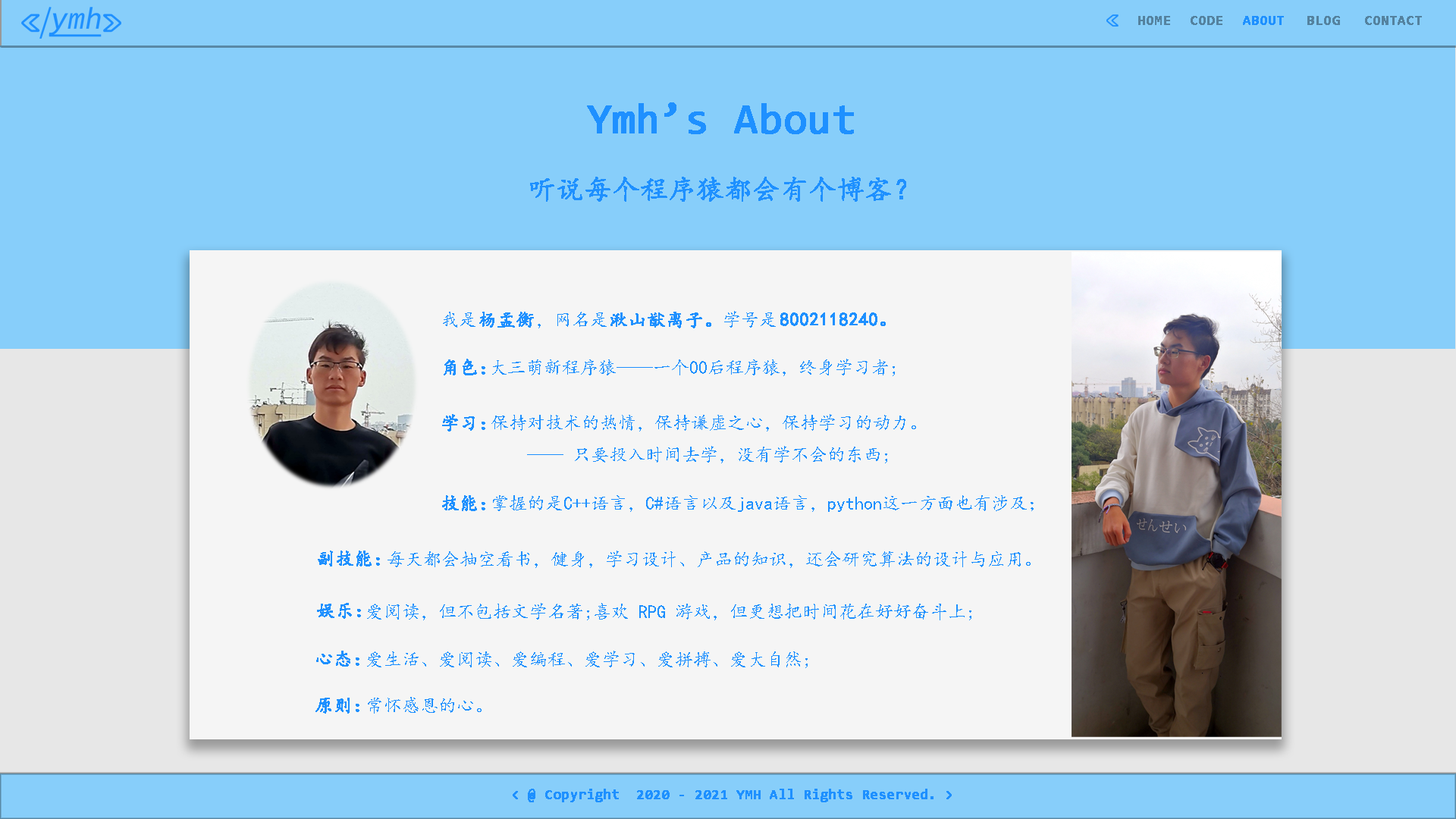
<style>
.page{position:relative;width:1456px;height:819px;background:#87cefa}
.page>*{position:absolute;margin:0}
.t1{font:13.6px "Consolas";color:#54829f;font-weight:bold}
.t2{font:13.6px "Consolas";color:#1e90ff;font-weight:bold}
.t3{font:42.5px "Consolas";color:#1e90ff;font-weight:bold}
.t4{font:27.3px "KaiTi";color:#1e90ff;font-weight:bold}
.t5{font:18.2px "KaiTi";color:#1e90ff}
.t6{font:18.2px "KaiTi";color:#1e90ff;font-weight:bold}
</style>
<div class="page">
<p class="t1" style="left:1138px;top:16px;width:32px;height:9px">HOME</p>
<p class="t1" style="left:1191px;top:16px;width:31px;height:9px">CODE</p>
<p class="t2" style="left:1243px;top:16px;width:41px;height:9px">ABOUT</p>
<p class="t1" style="left:1307px;top:16px;width:33px;height:9px">BLOG</p>
<p class="t1" style="left:1365px;top:16px;width:57px;height:9px">CONTACT</p>
<p class="t3" style="left:587px;top:102px;width:267px;height:32px">Ymh’s About</p>
<p class="t4" style="left:530px;top:177px;width:376px;height:25px">听说每个程序猿都会有个博客？</p>
<p class="t5" style="left:443px;top:312px;width:32px;height:16px">我是</p>
<p class="t6" style="left:479px;top:312px;width:55px;height:16px">杨孟衡</p>
<p class="t5" style="left:538px;top:312px;width:69px;height:16px">，网名是</p>
<p class="t6" style="left:610px;top:312px;width:101px;height:16px">湫山猷离子。</p>
<p class="t5" style="left:724px;top:311px;width:52px;height:17px">学号是</p>
<p class="t6" style="left:780px;top:312px;width:106px;height:14px">8002118240。</p>
<p class="t6" style="left:444px;top:359px;width:41px;height:16px">角色：</p>
<p class="t5" style="left:492px;top:359px;width:403px;height:17px">大三萌新程序猿——一个00后程序猿，终身学习者;</p>
<p class="t6" style="left:442px;top:414px;width:43px;height:17px">学习：</p>
<p class="t5" style="left:491px;top:414px;width:425px;height:49px;text-align:center">保持对技术的热情，保持谦虚之心，保持学习的动力。<br>—— 只要投入时间去学，没有学不会的东西;</p>
<p class="t6" style="left:442px;top:495px;width:43px;height:16px">技能：</p>
<p class="t5" style="left:493px;top:495px;width:541px;height:17px">掌握的是C++语言，C#语言以及java语言，python这一方面也有涉及；</p>
<p class="t6" style="left:318px;top:551px;width:62px;height:15px">副技能：</p>
<p class="t5" style="left:388px;top:551px;width:643px;height:17px">每天都会抽空看书，健身，学习设计、产品的知识，还会研究算法的设计与应用。</p>
<p class="t6" style="left:317px;top:603px;width:44px;height:16px">娱乐：</p>
<p class="t5" style="left:367px;top:603px;width:604px;height:17px">爱阅读，但不包括文学名著;喜欢 RPG 游戏，但更想把时间花在好好奋斗上;</p>
<p class="t6" style="left:316px;top:651px;width:43px;height:16px">心态：</p>
<p class="t5" style="left:367px;top:651px;width:441px;height:17px">爱生活、爱阅读、爱编程、爱学习、爱拼搏、爱大自然;</p>
<p class="t6" style="left:315px;top:698px;width:44px;height:16px">原则：</p>
<p class="t5" style="left:368px;top:697px;width:114px;height:17px">常怀感恩的心。</p>
<p class="t2" style="left:513px;top:789px;width:439px;height:13px">&lt; @ Copyright  2020 - 2021 YMH All Rights Reserved. &gt;</p>
</div>
